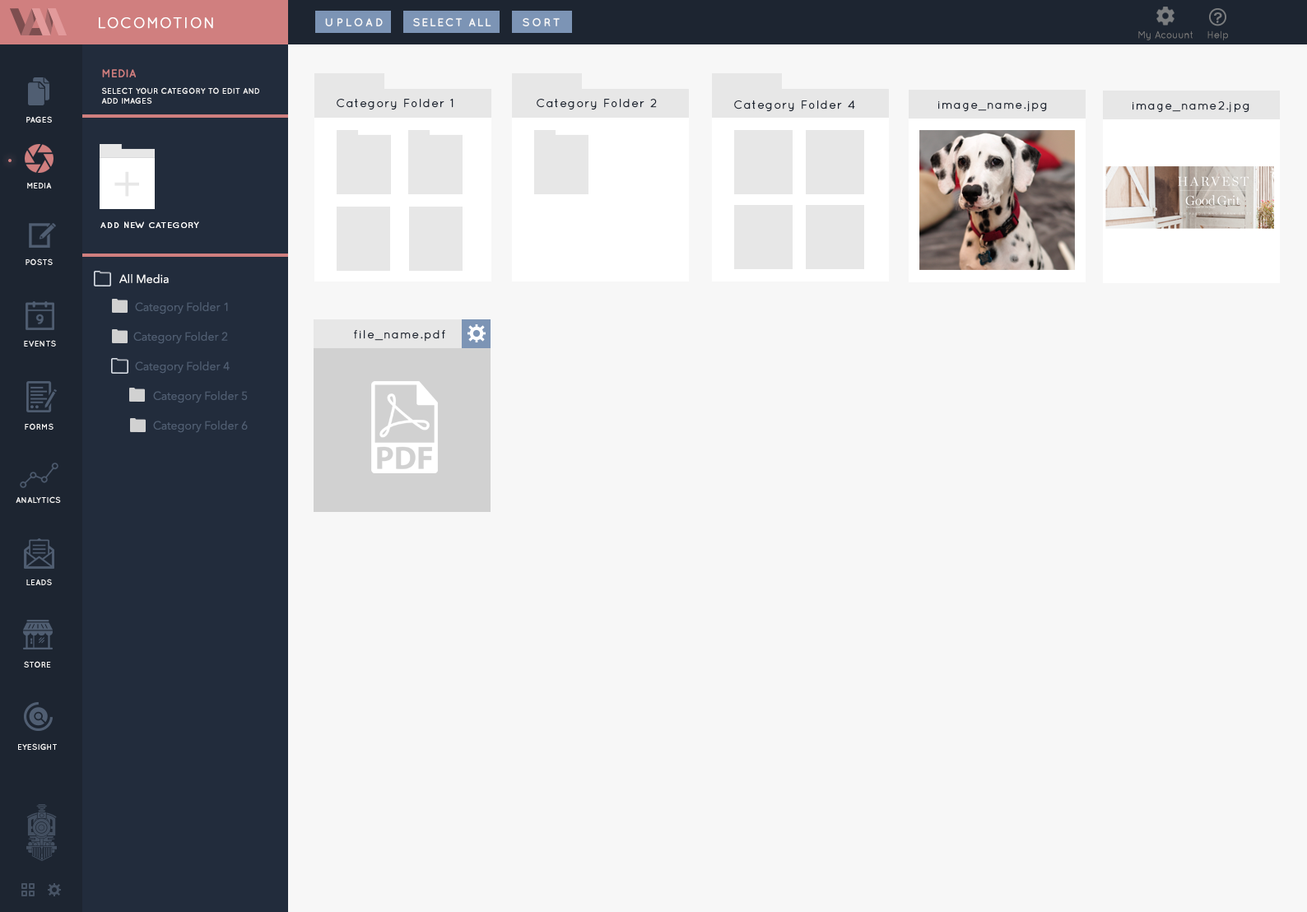
<style>
.page{position:relative;width:1307px;height:912px;background:#f7f7f7}
.page>*{position:absolute;margin:0}
.t1{font:14.8px "Quicksand-Regular";letter-spacing:0.07em;color:#ffffff;font-weight:bold}
.t2{font:11.5px "Quicksand-Bold";letter-spacing:0.2em;color:#f7f7f7;text-transform:uppercase}
.t3{font:11.5px "Quicksand-Bold";letter-spacing:0.1em;color:#f7f7f7;text-transform:uppercase}
.t4{font:11.5px "Quicksand-Bold";letter-spacing:0.175em;color:#f7f7f7;text-transform:uppercase}
.t5{font:9.9px "Quicksand-Regular";color:#797979}
.t6{font:11.5px "Quicksand-Bold";color:#d07f7f;text-transform:uppercase}
.t7{font:8.2px/9.9px "Quicksand-Bold";color:#f7f7f7;text-transform:uppercase}
.t8{font:11.5px "Quicksand-Regular";letter-spacing:0.07em;color:#1d2531;font-weight:bold}
.t9{font:8.2px "Quicksand-Bold";color:#f7f7f7;text-transform:uppercase}
.t10{font:8.2px "Quicksand-Regular";letter-spacing:0.07em;color:#ffffff;font-weight:bold}
.t11{font:11.5px "AvenirNext-Regular";color:#ffffff}
.t12{font:11.5px "AvenirNext-Regular";color:#505e72}
</style>
<div class="page">
<p class="t1" style="left:99px;top:17px;width:114px;height:12px">LOCOMOTION</p>
<p class="t2" style="left:325px;top:18px;width:58px;height:8px">UPLOAD</p>
<p class="t3" style="left:413px;top:18px;width:78px;height:8px">SELECT ALL</p>
<p class="t4" style="left:523px;top:18px;width:37px;height:8px">SORT</p>
<p class="t5" style="left:1139px;top:30px;width:54px;height:10px">My Acouunt</p>
<p class="t5" style="left:1208px;top:30px;width:20px;height:10px">Help</p>
<p class="t6" style="left:102px;top:69px;width:34px;height:8px">MEDIA</p>
<p class="t7" style="left:101px;top:87px;width:158px;height:17px">SELECT YOUR CATEGORY TO EDIT AND<br>ADD IMAGES</p>
<p class="t8" style="left:337px;top:99px;width:117px;height:11px">Category Folder 1</p>
<p class="t8" style="left:537px;top:99px;width:120px;height:11px">Category Folder 2</p>
<p class="t8" style="left:734px;top:100px;width:121px;height:12px">Category Folder 4</p>
<p class="t8" style="left:938px;top:101px;width:109px;height:11px">image_name.jpg</p>
<p class="t8" style="left:1133px;top:101px;width:117px;height:12px">image_name2.jpg</p>
<p class="t9" style="left:26px;top:116px;width:26px;height:7px">pages</p>
<p class="t9" style="left:27px;top:183px;width:25px;height:6px">MEDIA</p>
<p class="t10" style="left:100px;top:221px;width:99px;height:7px">ADD NEW CATEGORY</p>
<p class="t9" style="left:26px;top:258px;width:27px;height:7px">POSTS</p>
<p class="t11" style="left:119px;top:274px;width:50px;height:9px">All Media</p>
<p class="t12" style="left:135px;top:302px;width:93px;height:12px">Category Folder 1</p>
<p class="t9" style="left:24px;top:340px;width:32px;height:7px">EVENTS</p>
<p class="t12" style="left:133px;top:332px;width:95px;height:12px">Category Folder 2</p>
<p class="t8" style="left:354px;top:330px;width:91px;height:12px">file_name.pdf</p>
<p class="t12" style="left:135px;top:361px;width:95px;height:13px">Category Folder 4</p>
<p class="t12" style="left:153px;top:391px;width:95px;height:12px">Category Folder 5</p>
<p class="t9" style="left:25px;top:423px;width:29px;height:7px">FORMS</p>
<p class="t12" style="left:153px;top:421px;width:95px;height:12px">Category Folder 6</p>
<p class="t9" style="left:16px;top:496px;width:45px;height:7px">ANALYTICS</p>
<p class="t9" style="left:26px;top:579px;width:26px;height:6px">LEADS</p>
<p class="t9" style="left:24px;top:661px;width:27px;height:7px">STORE</p>
<p class="t9" style="left:18px;top:743px;width:39px;height:7px">EYESIGHT</p>
</div>
